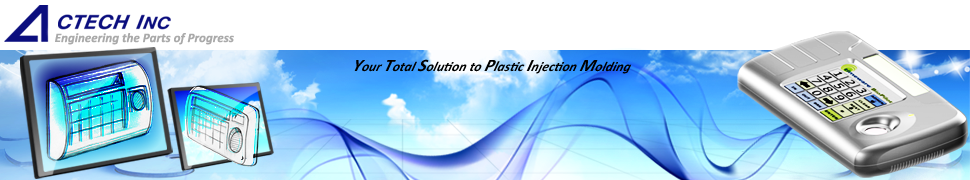
<style>
.page{position:relative;width:970px;height:180px;background:#ffffff}
.page>*{position:absolute;margin:0}
.t1{font:13px "Calibri-BoldItalic";color:#aaaaaa}
.t2{font:12px "Calibri-BoldItalic";color:#f7f7f7}
.t3{font:14px "Calibri-BoldItalic";color:#000000;scale:0.97 1}
.t4{font:18px "Calibri-BoldItalic";color:#000000;scale:0.97 1}
.t5{font:15px "Calibri-BoldItalic";color:#000000;scale:0.97 1}
</style>
<div class="page">
<p class="t1" style="left:55px;top:33px;width:179px;height:12px"><span class="t2"> </span>Engineering the Parts of Progress</p>
<p class="t3" style="left:354px;top:59px;width:278px;height:15px"><span class="t4">Y</span>our <span class="t4">T</span>otal <span class="t4">S</span>olution to <span class="t4">P</span><span class="t5">l</span>astic <span class="t4">I</span>njection <span class="t4">M</span>olding</p>
</div>
